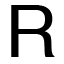
<style>
.page{position:relative;width:64px;height:64px;background:#ffffff}
.page>*{position:absolute;margin:0}
.t1{font:72px "Helvetica";color:#000000}
</style>
<div class="page">
<p class="t1" style="left:11px;top:5px;width:44px;height:52px">R</p>
</div>
